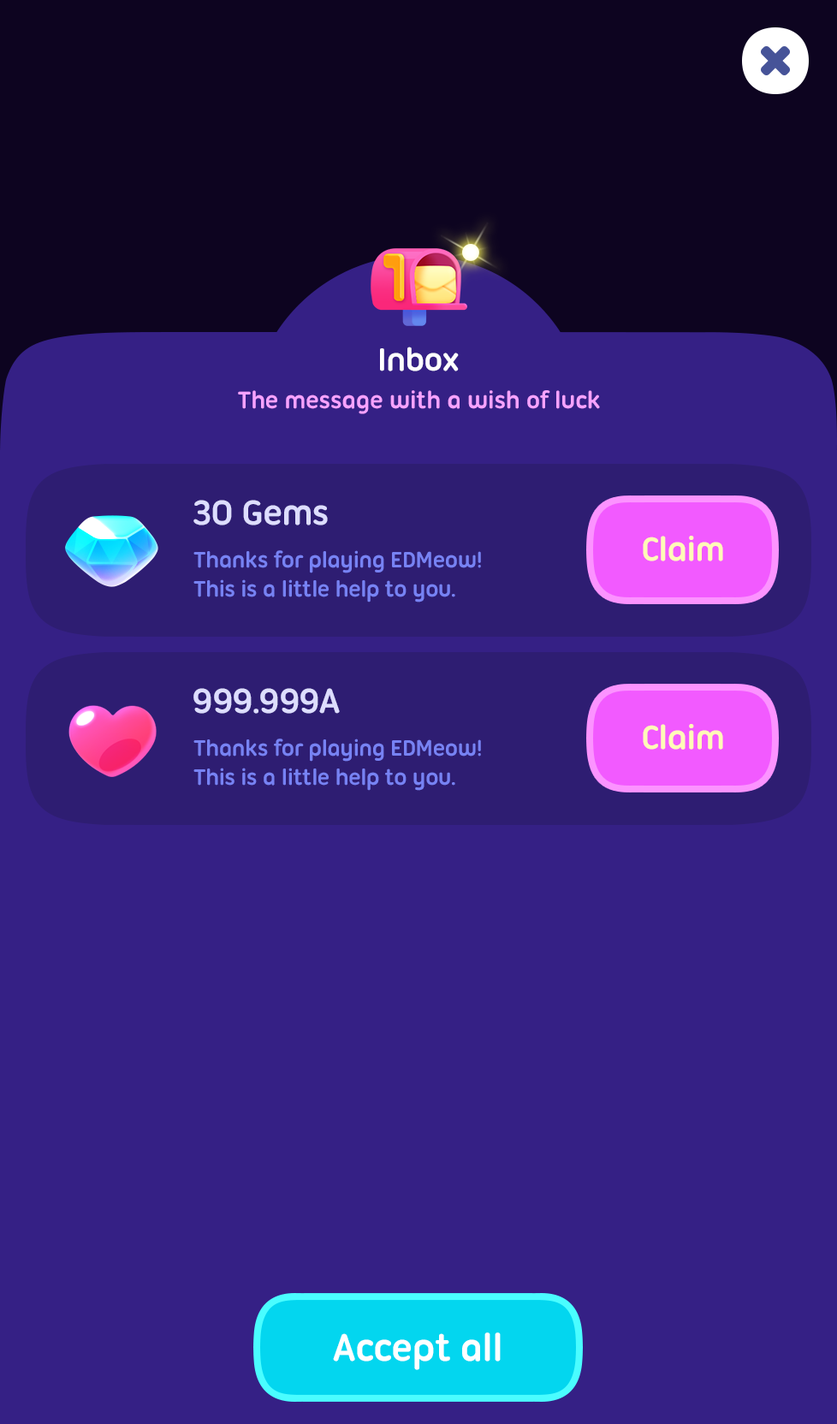
<style>
.page{position:relative;width:837px;height:1424px;background:#352085}
.page>*{position:absolute;margin:0}
.t1{font:34.2px "UbuntuTitling-Bold";letter-spacing:-0.025em;color:#ffffff}
.t2{font:25.7px "UbuntuTitling-Bold";letter-spacing:-0.025em;color:#f7a2ff}
.t3{font:37.7px "UbuntuTitling-Bold";letter-spacing:-0.025em;color:#ddddff}
.t4{font:36px "UbuntuTitling-Bold";letter-spacing:-0.025em;color:#fefbb7}
.t5{font:24px "UbuntuTitling-Bold";letter-spacing:-0.025em;color:#7782f4}
.t6{font:41.1px "UbuntuTitling-Bold";letter-spacing:-0.025em;color:#ffffff}
</style>
<div class="page">
<p class="t1" style="left:380px;top:347px;width:79px;height:25px">Inbox</p>
<p class="t2" style="left:238px;top:390px;width:362px;height:24px">The message with a wish of luck</p>
<p class="t3" style="left:193px;top:500px;width:135px;height:26px">30 Gems</p>
<p class="t4" style="left:643px;top:536px;width:80px;height:26px">Claim</p>
<p class="t5" style="left:193px;top:550px;width:288px;height:53px">Thanks for playing EDMeow!<br>This is a little help to you.</p>
<p class="t3" style="left:193px;top:688px;width:147px;height:26px">999.999A</p>
<p class="t4" style="left:643px;top:724px;width:80px;height:26px">Claim</p>
<p class="t5" style="left:193px;top:739px;width:288px;height:52px">Thanks for playing EDMeow!<br>This is a little help to you.</p>
<p class="t6" style="left:333px;top:1333px;width:168px;height:37px">Accept all</p>
</div>
